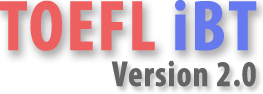
<style>
.page{position:relative;width:263px;height:94px;background:#ffffff}
.page>*{position:absolute;margin:0}
.t1{font:72px "MyriadPro-BoldCond";letter-spacing:0.01em;color:#ee5f5f;font-weight:bold}
.t2{font:72px "MyriadPro-BoldCond";letter-spacing:0.01em;color:#6679ee;font-weight:bold}
.t3{font:36px "MyriadPro-BoldCond";letter-spacing:0.01em;color:#646464;font-weight:bold;scale:0.96 1}
</style>
<div class="page">
<p class="t1" style="left:0px;top:0px;width:257px;height:51px">TOEFL <span class="t2">iBT</span></p>
<p class="t3" style="left:111px;top:60px;width:145px;height:27px">Version 2.0</p>
</div>
